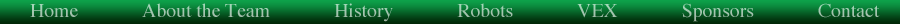
<style>
.page{position:relative;width:900px;height:24px}
.page>*{position:absolute;margin:0}
.t1{font:19.7px "Times-Roman";color:#a3c5af}
</style>
<div class="page">
<p class="t1" style="left:30px;top:3px;width:850px;height:19px">Home             About the Team             History             Robots             VEX             Sponsors             Contact</p>
</div>
